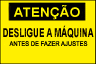
<style>
.page{position:relative;width:96px;height:64px;background:#ffef00}
.page>*{position:absolute;margin:0}
.t1{font:13px "Arial-BoldMT";letter-spacing:0.005em;color:#ffff00;scale:1.05 1}
.t2{font:12.1px "Arial-BoldMT";color:#080000;scale:0.68 1}
.t3{font:6.5px "ArialMT";letter-spacing:0.025em;color:#000000;scale:0.87 1}
</style>
<div class="page">
<p class="t1" style="left:13px;top:5px;width:67px;height:15px">ATENÇÃO</p>
<p class="t2" style="left:3px;top:25px;width:91px;height:13px">DESLIGUE A MÁQUINA</p>
<p class="t3" style="left:9px;top:41px;width:79px;height:5px">ANTES DE FAZER AJUSTES</p>
</div>
